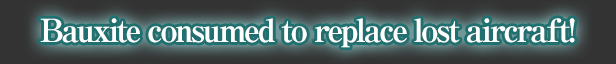
<style>
.page{position:relative;width:616px;height:64px}
.page>*{position:absolute;margin:0}
.t1{font:32px "RyuminPro-ExBold";letter-spacing:-0.08em;color:#ffffff}
</style>
<div class="page">
<p class="t1" style="left:40px;top:18px;width:535px;height:30px">Bauxite consumed to replace lost aircraft!</p>
</div>
